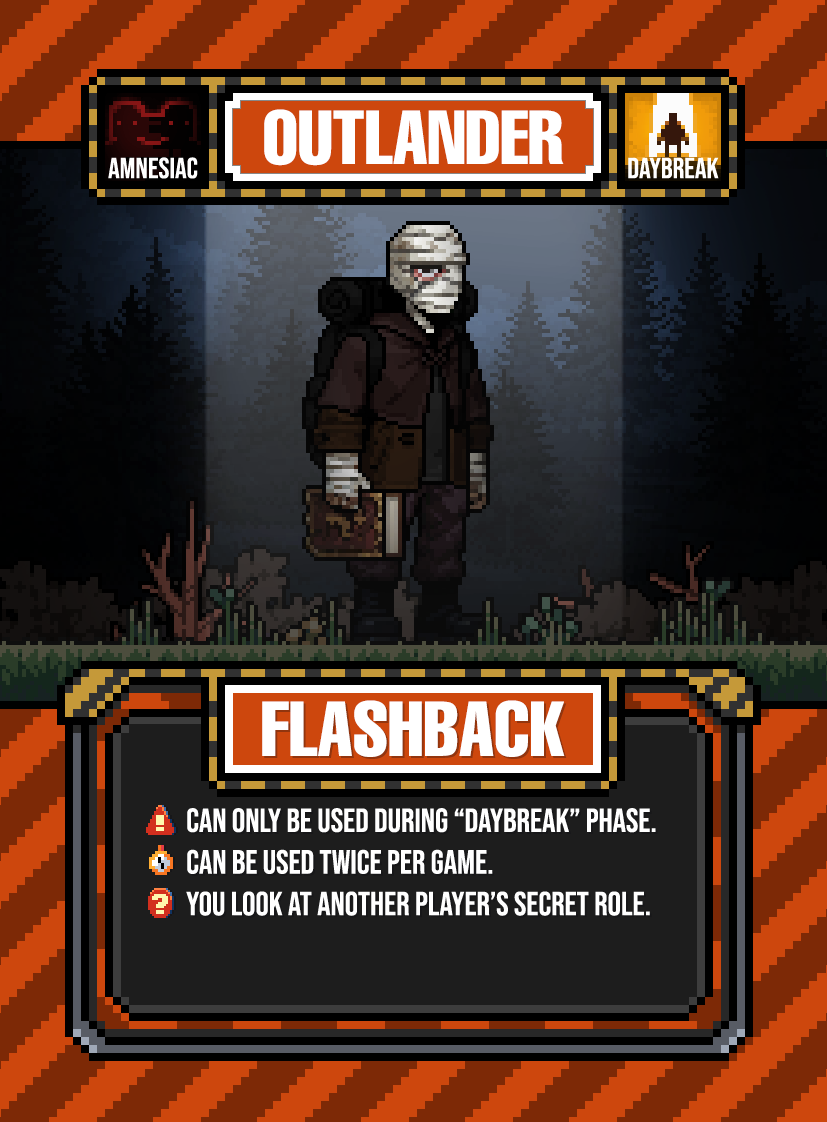
<style>
.page{position:relative;width:827px;height:1122px}
.page>*{position:absolute;margin:0}
.t1{font:75px "HelveticaLTPro-Compressed";color:#ffffff}
.t2{font:76.2px "HelveticaLTPro-Compressed";color:#ffffff}
.t3{font:33.3px/33.3px "BebasNeue-Regular";color:#ffffff}
.t4{font:33.3px/41.7px "BebasNeue-Regular";color:#ffffff}
</style>
<div class="page">
<p class="t1" style="left:264px;top:109px;width:300px;height:57px">OUTLANDER</p>
<p class="t2" style="left:262px;top:700px;width:303px;height:57px">FLASHBACK</p>
<p class="t3" style="left:186px;top:808px;width:470px;height:108px">can ONLY be used during “daybreak” phase.<br><span class="t4">can be used twice per game.<br>you look at </span>another player’s secret role.</p>
</div>
